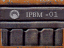
<style>
.page{position:relative;width:64px;height:48px}
.page>*{position:absolute;margin:0}
.t1{font:6.7px "Constantia";letter-spacing:0.02em;text-transform:uppercase}
</style>
<div class="page">
<p class="t1" style="left:26px;top:12px;width:17px;height:5px">IPBM</p>
</div>
